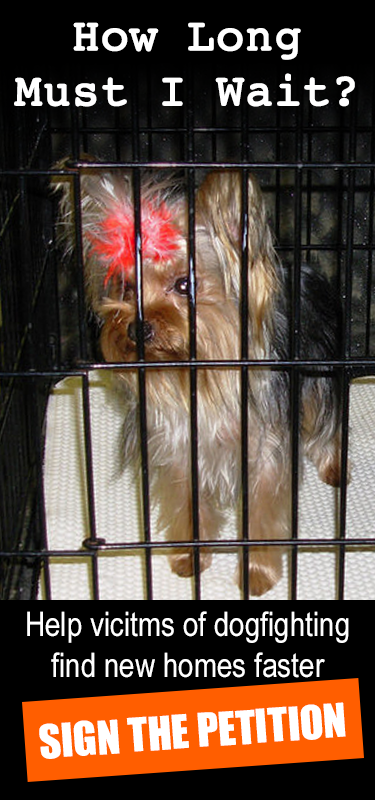
<style>
.page{position:relative;width:375px;height:800px;background:#000000}
.page>*{position:absolute;margin:0}
.t1{font:46px "Courier";color:#ffffff;font-weight:bold}
.t2{font:34px "ArialNarrow";color:#ffffff}
.t3{font:43px "Impact";color:#ffffff}
</style>
<div class="page">
<p class="t1" style="left:14px;top:22px;width:341px;height:85px;text-align:center">How Long <br>Must I Wait?</p>
<p class="t2" style="left:27px;top:611px;width:322px;height:67px;text-align:center">Help vicitms of dogfighting find new homes faster</p>
<p class="t3" style="left:39px;top:702px;width:307px;height:57px;rotate:-4deg">SIGN THE PETITION</p>
</div>
